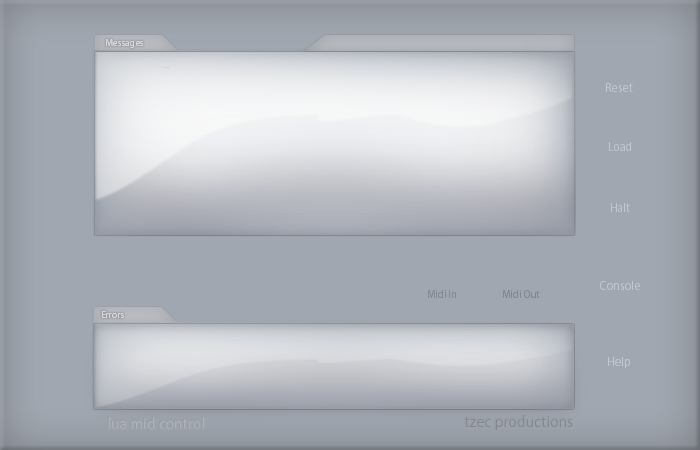
<style>
.page{position:relative;width:700px;height:450px;background:#a1a7b0}
.page>*{position:absolute;margin:0}
.t1{font:9.9px "Myriad-Roman";color:#d9dbdf;scale:0.96 1}
.t2{font:12.6px "Myriad-Roman";color:#c4c7cd;scale:0.96 1}
.t3{font:10.8px "Myriad-Roman";color:#848990;scale:0.96 1}
.t4{font:10.8px "Myriad-Roman";color:#83888f;scale:0.96 1}
.t5{font:16.2px "Myriad-Roman";color:#aeb3ba;scale:0.96 1}
.t6{font:16.2px "Myriad-Roman";color:#838890;scale:0.96 1}
</style>
<div class="page">
<p class="t1" style="left:106px;top:39px;width:37px;height:9px">Messages</p>
<p class="t2" style="left:606px;top:83px;width:27px;height:9px">Reset</p>
<p class="t2" style="left:609px;top:142px;width:22px;height:9px">Load</p>
<p class="t2" style="left:611px;top:203px;width:19px;height:9px">Halt</p>
<p class="t2" style="left:600px;top:281px;width:40px;height:9px">Console</p>
<p class="t3" style="left:428px;top:290px;width:28px;height:8px">Midi In</p>
<p class="t4" style="left:503px;top:290px;width:37px;height:8px">Midi Out</p>
<p class="t1" style="left:102px;top:311px;width:22px;height:7px">Errors</p>
<p class="t2" style="left:608px;top:357px;width:22px;height:11px">Help</p>
<p class="t5" style="left:108px;top:417px;width:96px;height:12px">lua mid control</p>
<p class="t6" style="left:465px;top:415px;width:108px;height:15px">tzec productions</p>
</div>
